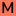
<style>
.page{position:relative;width:16px;height:16px;background:#ff7657}
.page>*{position:absolute;margin:0}
.t1{font:15px "NunitoSans-Bold";letter-spacing:0.005em;color:#000000}
</style>
<div class="page">
<p class="t1" style="left:2px;top:2px;width:12px;height:11px">M</p>
</div>
